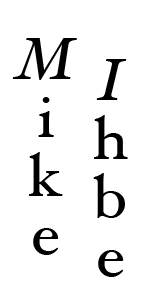
<style>
.page{position:relative;width:150px;height:300px;background:#ffffff}
.page>*{position:absolute;margin:0}
.t1{font:60px/65px "HoeflerText-Regular";letter-spacing:-0.025em;color:#000000;scale:1.05 1}
.t2{font:60px/65px "HoeflerText-Italic";letter-spacing:-0.025em;color:#000000;scale:1.05 1}
</style>
<div class="page">
<p class="t1" style="left:12px;top:38px;width:116px;height:239px"><span class="t2">  I</span>hbe<br><span class="t2">M</span>ike</p>
</div>
